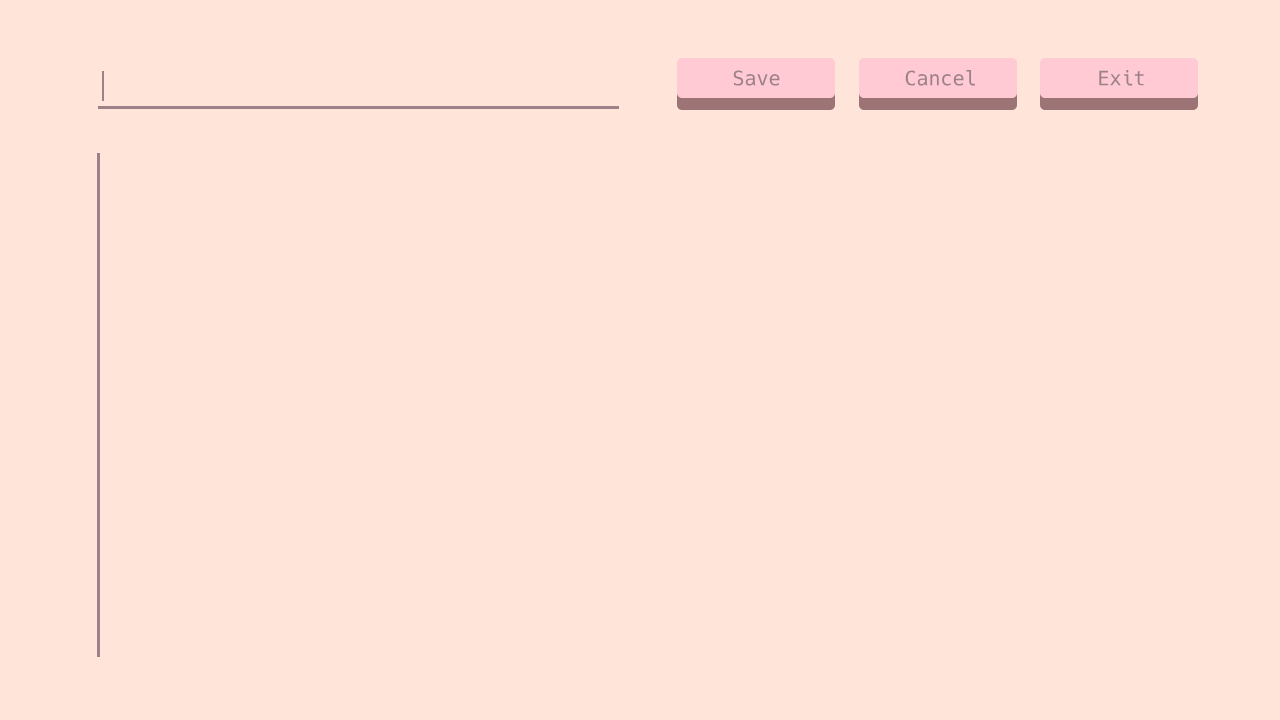
<style>
.page{position:relative;width:1280px;height:720px;background:#ffe5d9}
.page>*{position:absolute;margin:0}
.t1{font:20px "Hack-Regular";color:#9d8189}
</style>
<div class="page">
<p class="t1" style="left:733px;top:70px;width:47px;height:16px">Save</p>
<p class="t1" style="left:905px;top:70px;width:70px;height:16px">Cancel</p>
<p class="t1" style="left:1099px;top:70px;width:45px;height:16px">Exit</p>
</div>
